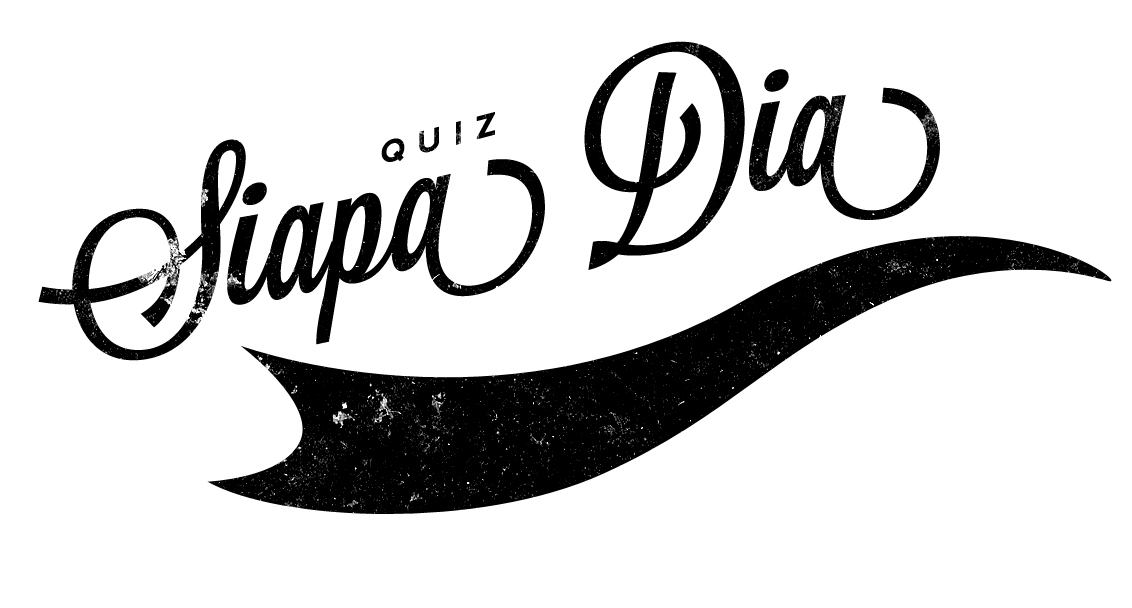
<style>
.page{position:relative;width:1132px;height:608px;background:#ffffff}
.page>*{position:absolute;margin:0}
.t1{font:184.4px/212.9px "Lavanderia-Sturdy";color:#000000}
.t2{font:30.6px "nevis-Bold";letter-spacing:0.4em;color:#000000;text-transform:uppercase;scale:1.03 1}
</style>
<div class="page">
<p class="t1" style="left:38px;top:41px;width:902px;height:320px;text-align:center">Siapa Dia</p>
<p class="t2" style="left:381px;top:112px;width:114px;height:50px;rotate:-15deg">Quiz</p>
</div>
